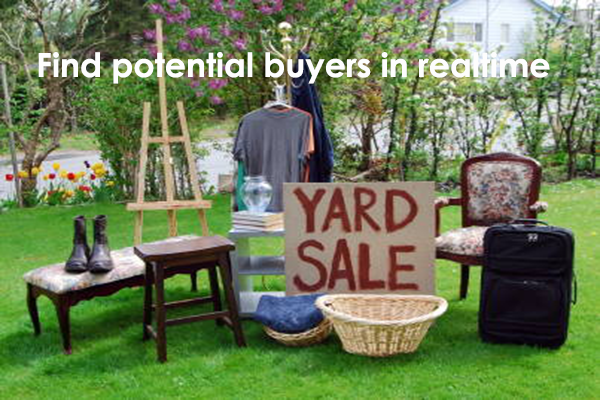
<style>
.page{position:relative;width:600px;height:400px}
.page>*{position:absolute;margin:0}
.t1{font:33.3px "CenturyGothic-Bold";color:#fdfdfd}
</style>
<div class="page">
<p class="t1" style="left:38px;top:52px;width:512px;height:32px">Find potential buyers in realtime</p>
</div>
